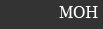
<style>
.page{position:relative;width:103px;height:29px;background:#333333}
.page>*{position:absolute;margin:0}
.t1{font:16px "LucidaBright";color:#ffffff}
</style>
<div class="page">
<p class="t1" style="left:59px;top:6px;width:39px;height:12px">MOH</p>
</div>
